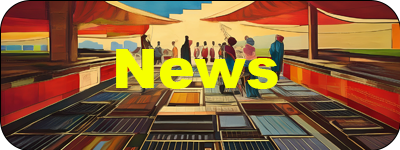
<style>
.page{position:relative;width:400px;height:150px}
.page>*{position:absolute;margin:0}
.t1{font:54.7px "Arial-Black";color:#f6ff00}
</style>
<div class="page">
<p class="t1" style="left:116px;top:49px;width:162px;height:40px">News</p>
</div>
